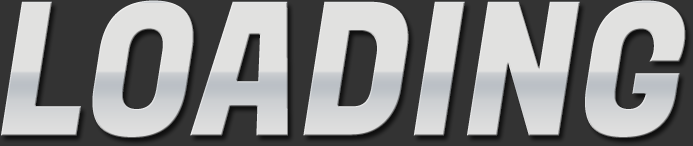
<style>
.page{position:relative;width:693px;height:146px;background:#333333}
.page>*{position:absolute;margin:0}
.t1{font:185.2px "FugazOne-Regular";color:#dfdfdf;scale:0.89 1}
</style>
<div class="page">
<p class="t1" style="left:1px;top:0px;width:685px;height:138px">LOADING</p>
</div>
